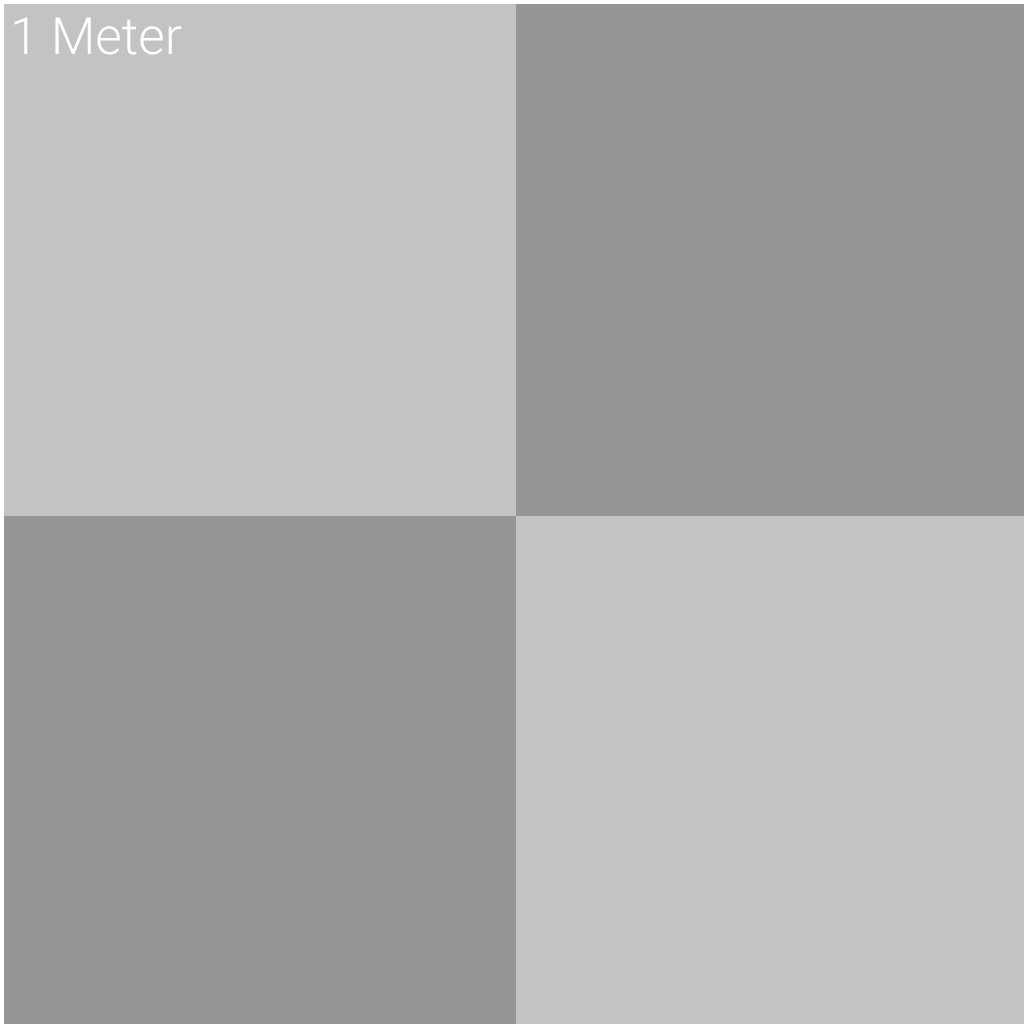
<style>
.page{position:relative;width:1024px;height:1024px;background:#969696}
.page>*{position:absolute;margin:0}
.t1{font:51.5px "Roboto-Light";color:#ffffff}
</style>
<div class="page">
<p class="t1" style="left:14px;top:17px;width:168px;height:38px">1 Meter</p>
</div>
